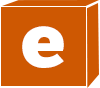
<style>
.page{position:relative;width:100px;height:88px;background:#ce5802}
.page>*{position:absolute;margin:0}
.t1{font:79.3px "ChunkFive-Regular";color:#ffffff}
</style>
<div class="page">
<p class="t1" style="left:22px;top:26px;width:42px;height:42px">e</p>
</div>
